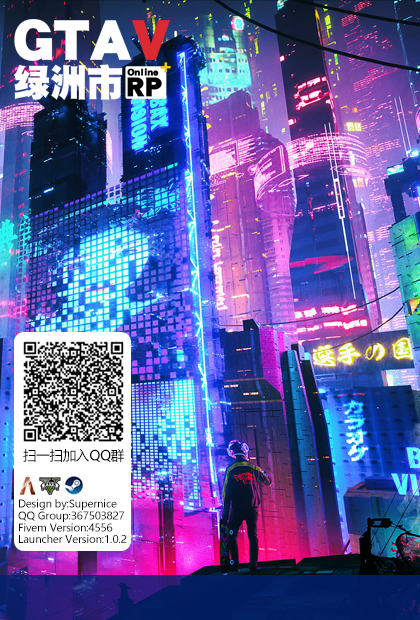
<style>
.page{position:relative;width:420px;height:620px}
.page>*{position:absolute;margin:0}
.t1{font:13.5px "MicrosoftYaHei";letter-spacing:-0.02em;color:#000000}
.t2{font:10.5px "MicrosoftYaHei";letter-spacing:-0.02em;color:#000000}
</style>
<div class="page">
<p class="t1" style="left:23px;top:449px;width:101px;height:14px">扫一扫加入QQ群</p>
<p class="t2" style="left:19px;top:499px;width:98px;height:11px">Design by:Supernice</p>
<p class="t2" style="left:18px;top:511px;width:107px;height:11px">QQ Group:367503827</p>
<p class="t2" style="left:19px;top:523px;width:94px;height:9px">Fivem Version:4556</p>
<p class="t2" style="left:19px;top:534px;width:108px;height:9px">Launcher Version:1.0.2</p>
</div>
